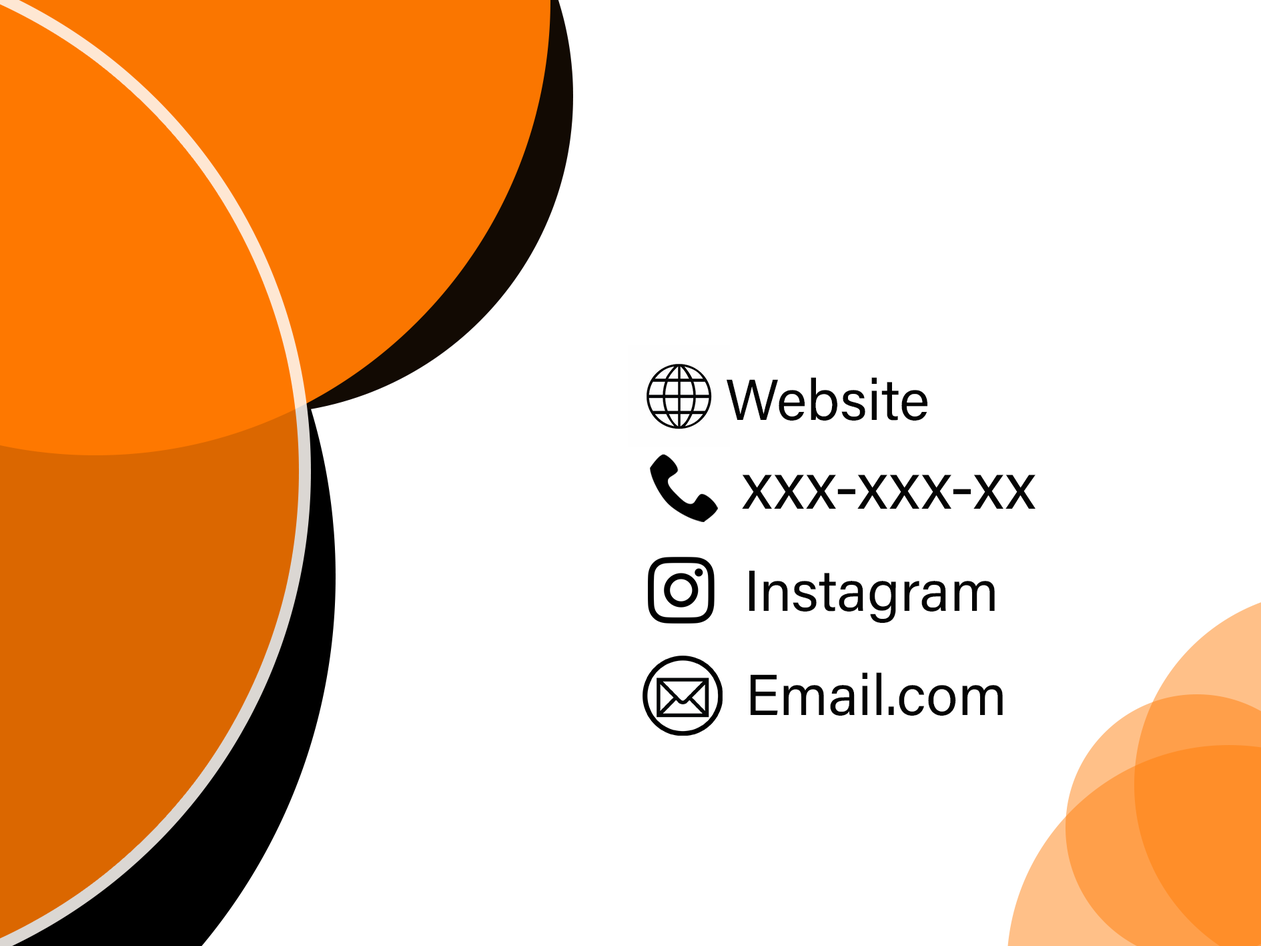
<style>
.page{position:relative;width:1261px;height:946px;background:#ffffff}
.page>*{position:absolute;margin:0}
.t1{font:57.7px "AcuminConcept-Regular";color:#040404}
.t2{font:66.7px "AcuminConcept-Regular";color:#040404}
</style>
<div class="page">
<p class="t1" style="left:727px;top:377px;width:201px;height:43px">Website</p>
<p class="t2" style="left:742px;top:474px;width:294px;height:34px">xxx-xxx-xx</p>
<p class="t1" style="left:749px;top:570px;width:246px;height:53px">Instagram</p>
<p class="t1" style="left:751px;top:672px;width:252px;height:43px">Email.com</p>
</div>
